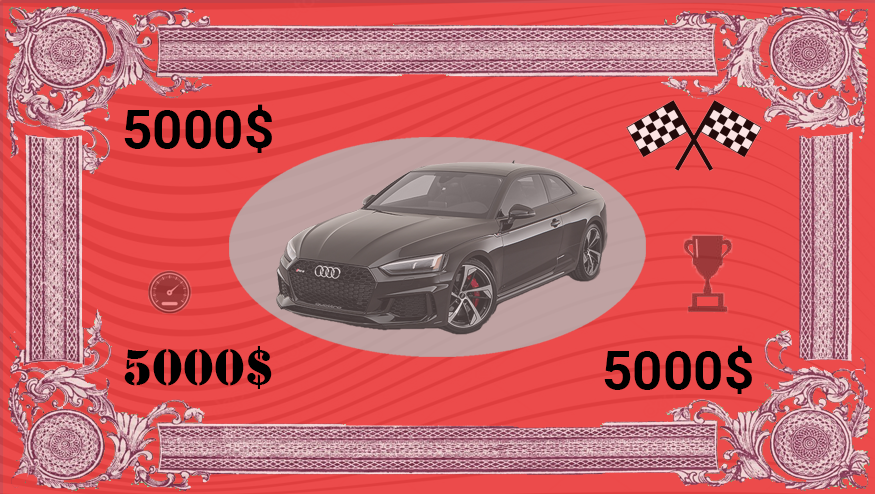
<style>
.page{position:relative;width:875px;height:494px;background:#ec4b4b}
.page>*{position:absolute;margin:0}
.t1{font:53.3px "Roboto-Bold";color:#000000}
.t2{font:53.3px "Stencil";color:#000000}
</style>
<div class="page">
<p class="t1" style="left:124px;top:104px;width:148px;height:49px">5000$</p>
<p class="t2" style="left:124px;top:346px;width:148px;height:43px">5000$</p>
<p class="t1" style="left:604px;top:345px;width:148px;height:49px">5000$</p>
</div>
